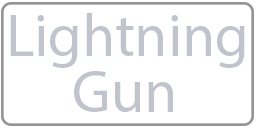
<style>
.page{position:relative;width:256px;height:128px;background:#ffffff}
.page>*{position:absolute;margin:0}
.t1{font:60px "MyriadPro-Regular";color:#c1c4cc}
</style>
<div class="page">
<p class="t1" style="left:10px;top:13px;width:235px;height:55px">Lightning</p>
<p class="t1" style="left:74px;top:71px;width:99px;height:41px">Gun</p>
</div>
